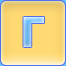
<style>
.page{position:relative;width:66px;height:66px;background:#ffd972}
.page>*{position:absolute;margin:0}
.t1{font:41px "Tahoma-Bold"}
</style>
<div class="page">
<p class="t1" style="left:23px;top:17px;width:21px;height:30px">Г</p>
<p class="t1" style="left:23px;top:17px;width:21px;height:30px">Г</p>
</div>
